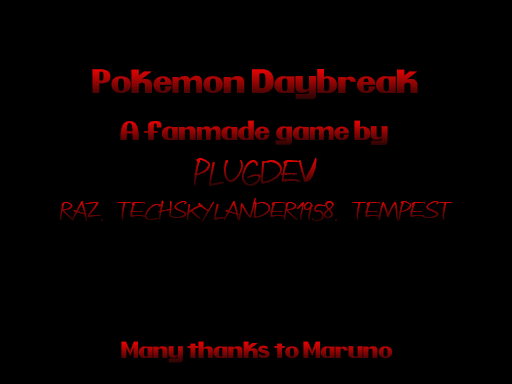
<style>
.page{position:relative;width:512px;height:384px;background:#000000}
.page>*{position:absolute;margin:0}
.t1{font:30px "Pretendo"}
.t2{font:24px "Pretendo"}
.t3{font:49.4px "Attractmorewomen";scale:0.85 1}
.t4{font:32.4px "Attractmorewomen"}
.t5{font:20.7px "Pretendo"}
</style>
<div class="page">
<p class="t1" style="left:92px;top:69px;width:326px;height:31px">Pokemon Daybreak</p>
<p class="t2" style="left:120px;top:120px;width:268px;height:25px">A fanmade game by</p>
<p class="t3" style="left:193px;top:158px;width:124px;height:28px">Plugdev</p>
<p class="t4" style="left:59px;top:198px;width:394px;height:24px">raZ, TechSkylander1958, TEMPEST</p>
<p class="t5" style="left:121px;top:341px;width:272px;height:22px">Many thanks to Maruno.</p>
</div>
